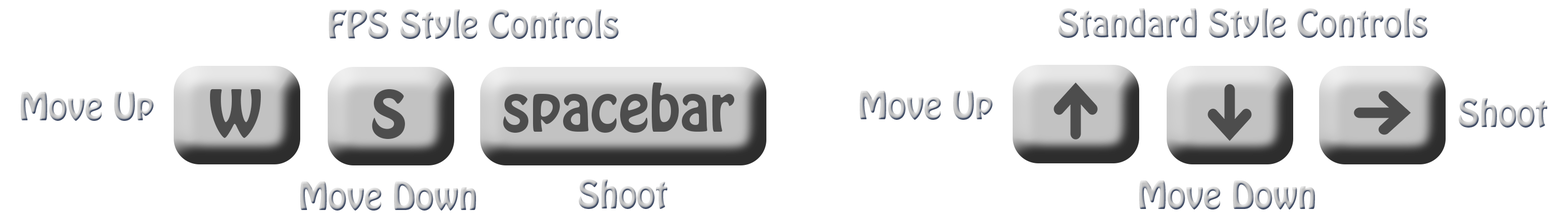
<style>
.page{position:relative;width:1568px;height:224px;background:#ffffff}
.page>*{position:absolute;margin:0}
.t1{font:34.2px "HoboStd"}
.t2{font:74.7px "HoboStd";color:#4d4d4d}
.t3{font:57.6px "HoboStd";color:#4d4d4d}
</style>
<div class="page">
<p class="t1" style="left:329px;top:9px;width:290px;height:30px">FPS Style Controls</p>
<p class="t1" style="left:1058px;top:8px;width:369px;height:30px">Standard Style Controls</p>
<p class="t2" style="left:210px;top:89px;width:51px;height:49px">w</p>
<p class="t2" style="left:372px;top:89px;width:33px;height:50px">s</p>
<p class="t3" style="left:503px;top:82px;width:232px;height:51px">spacebar</p>
<p class="t1" style="left:21px;top:92px;width:132px;height:29px">Move Up</p>
<p class="t1" style="left:860px;top:91px;width:132px;height:29px">Move Up</p>
<p class="t1" style="left:1459px;top:98px;width:88px;height:30px">Shoot</p>
<p class="t1" style="left:300px;top:181px;width:176px;height:30px">Move Down</p>
<p class="t1" style="left:579px;top:179px;width:88px;height:30px">Shoot</p>
<p class="t1" style="left:1139px;top:180px;width:176px;height:29px">Move Down</p>
</div>
